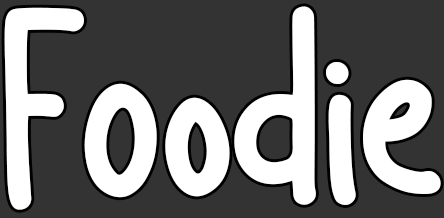
<style>
.page{position:relative;width:444px;height:218px;background:#333333}
.page>*{position:absolute;margin:0}
.t1{font:270.8px "StickyNotesRegular";color:#ffffff}
</style>
<div class="page">
<p class="t1" style="left:4px;top:6px;width:437px;height:204px">Foodie</p>
</div>
